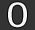
<style>
.page{position:relative;width:35px;height:30px;background:#333333}
.page>*{position:absolute;margin:0}
.t1{font:34.5px "ArialMT";letter-spacing:0.025em;color:#f5f5f5;scale:1.2 1}
</style>
<div class="page">
<p class="t1" style="left:8px;top:2px;width:19px;height:26px">0</p>
</div>
